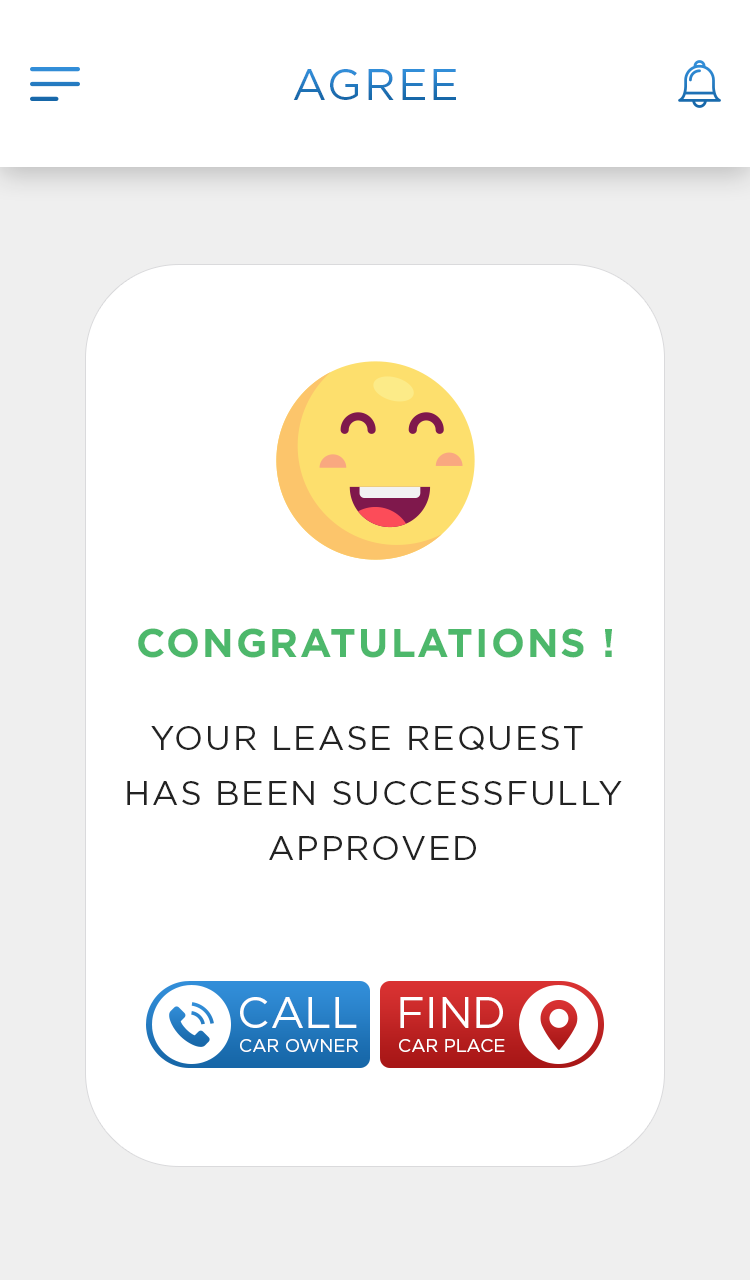
<style>
.page{position:relative;width:750px;height:1280px;background:#ffffff}
.page>*{position:absolute;margin:0}
.t1{font:44px "Gotham-Book";letter-spacing:0.05em;text-transform:uppercase}
.t2{font:40px "Gotham-Bold";letter-spacing:0.05em;color:#4db86b;text-transform:uppercase}
.t3{font:34px/55px "Gotham-Book";letter-spacing:0.05em;color:#222222;text-transform:uppercase}
.t4{font:43.7px "Gotham-Book";color:#ffffff}
.t5{font:18px "Gotham-Book";color:#ffffff}
</style>
<div class="page">
<p class="t1" style="left:293px;top:69px;width:163px;height:31px">AGREE</p>
<p class="t2" style="left:138px;top:628px;width:474px;height:30px">Congratulations !</p>
<p class="t3" style="left:127px;top:726px;width:495px;height:134px;text-align:center">Your lease request<br> has been successfully<br> approved</p>
<p class="t4" style="left:240px;top:997px;width:117px;height:31px">CALL</p>
<p class="t4" style="left:400px;top:997px;width:103px;height:31px">FIND</p>
<p class="t5" style="left:240px;top:1039px;width:118px;height:13px">CAR OWNER</p>
<p class="t5" style="left:399px;top:1039px;width:106px;height:13px">CAR PLACE</p>
</div>
